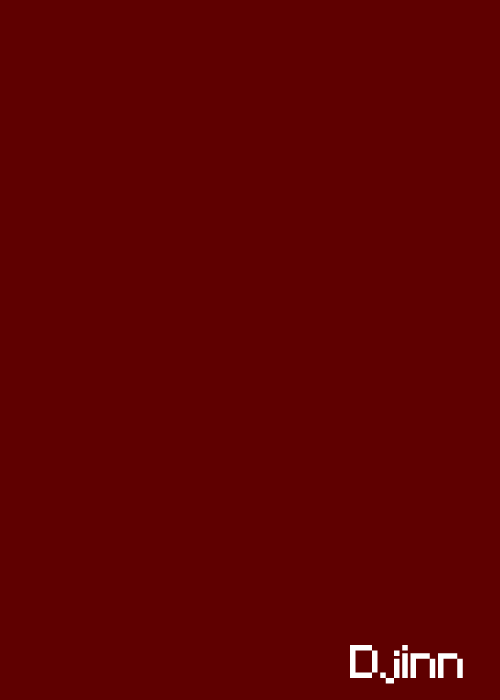
<style>
.page{position:relative;width:500px;height:700px;background:#5f0000}
.page>*{position:absolute;margin:0}
.t1{font:44px "Minecraft";color:#ffffff}
</style>
<div class="page">
<p class="t1" style="left:350px;top:645px;width:113px;height:39px">Djinn</p>
</div>
